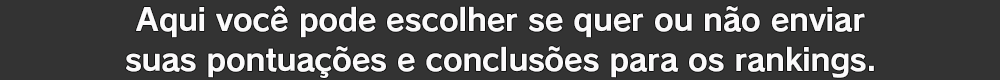
<style>
.page{position:relative;width:1000px;height:80px;background:#333333}
.page>*{position:absolute;margin:0}
.t1{font:30.7px "RodinPro-B";letter-spacing:-0.012em;color:#fbfafb}
</style>
<div class="page">
<p class="t1" style="left:136px;top:5px;width:729px;height:33px">Aqui você pode escolher se quer ou não enviar</p>
<p class="t1" style="left:126px;top:46px;width:748px;height:32px">suas pontuações e conclusões para os rankings.</p>
</div>
